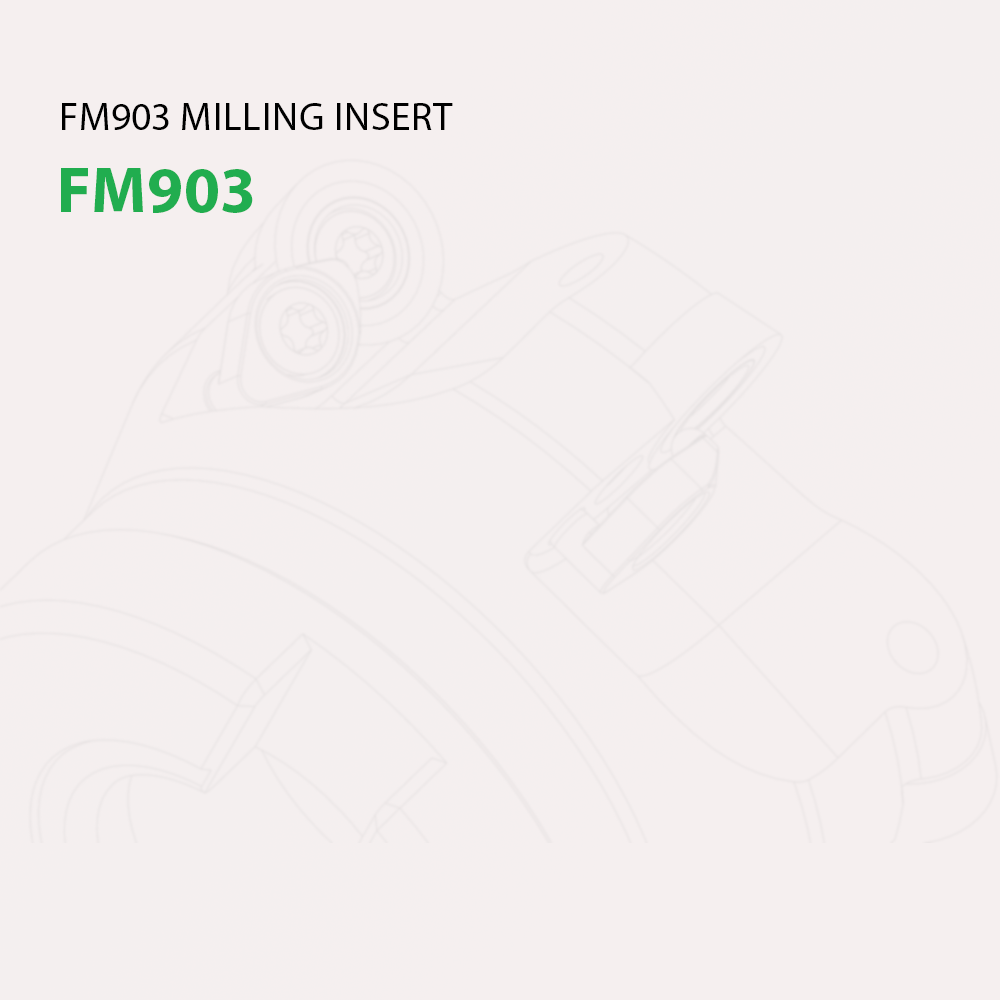
<style>
.page{position:relative;width:1000px;height:1000px;background:#f5efef}
.page>*{position:absolute;margin:0}
.t1{font:39.5px "MyriadPro-Regular";color:#000000;text-transform:uppercase}
.t2{font:65.4px "MyriadPro-Bold";color:#21ad4f;text-transform:uppercase}
</style>
<div class="page">
<p class="t1" style="left:62px;top:103px;width:391px;height:27px">FM903 milling insert</p>
<p class="t2" style="left:61px;top:168px;width:192px;height:45px">FM903</p>
</div>
